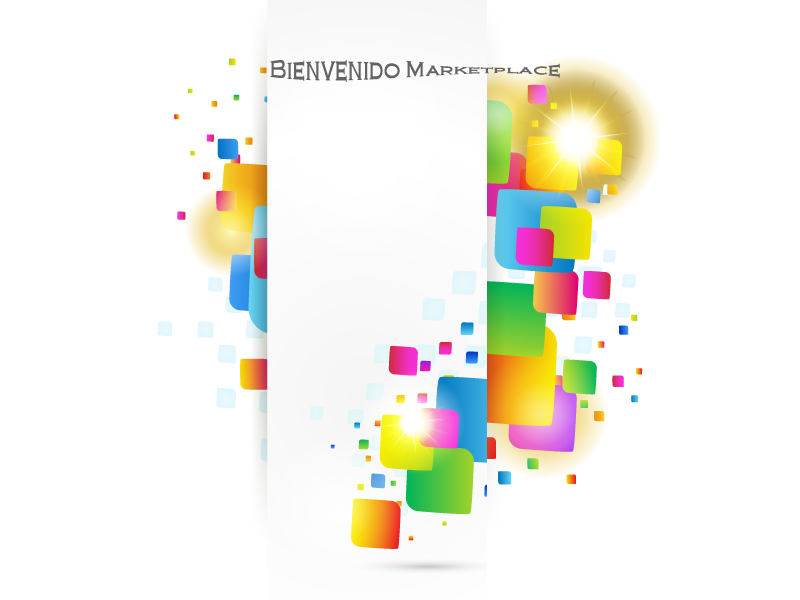
<style>
.page{position:relative;width:800px;height:600px;background:#ffffff}
.page>*{position:absolute;margin:0}
.t1{font:22px "CopperplateGothic-Light";color:#656464}
</style>
<div class="page">
<p class="t1" style="left:270px;top:60px;width:290px;height:22px">Bienvenido Marketplace</p>
</div>
